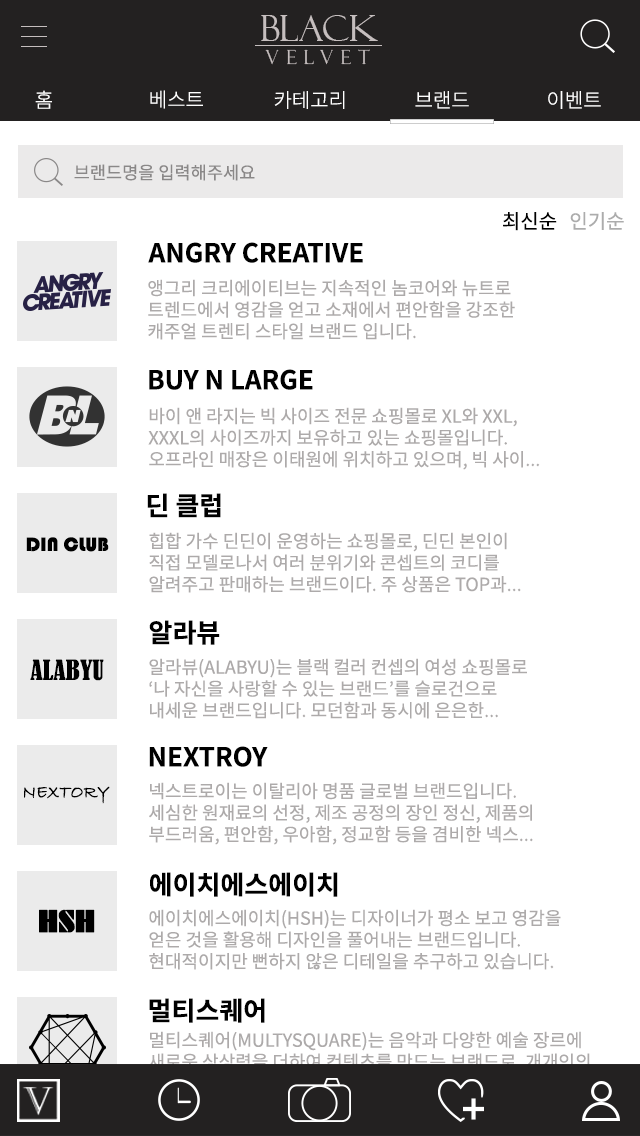
<style>
.page{position:relative;width:640px;height:1136px;background:#ffffff}
.page>*{position:absolute;margin:0}
.t1{font:35.6px "FelixTitlingMT";color:#c5bebe}
.t2{font:19.4px "FelixTitlingMT";letter-spacing:0.4em;color:#c5bebe}
.t3{font:20px "NotoSansCJKkr-Light";color:#ffffff}
.t4{font:17.6px "NotoSansCJKkr-Regular";color:#8a8888}
.t5{font:20px "NotoSansCJKkr-Regular";color:#000000}
.t6{font:20px "NotoSansCJKkr-Regular";color:#acacac}
.t7{font:26px "NotoSansCJKkr-Bold";color:#000000}
.t8{font:18px "NotoSansCJKkr-Regular";color:#adaaaa}
.t9{font:20px "Bauhaus93";color:#000000}
.t10{font:26px "BernardMT-Condensed";color:#010101}
.t11{font:18px "BradleyHandITC";color:#000000;font-weight:bold}
.t12{font:30px "FuturaBlack-BT";color:#000000;font-weight:bold}
</style>
<div class="page">
<p class="t1" style="left:261px;top:15px;width:117px;height:26px">BLACK</p>
<p class="t2" style="left:265px;top:49px;width:105px;height:16px">VELVET</p>
<p class="t3" style="left:35px;top:90px;width:17px;height:19px">홈</p>
<p class="t3" style="left:150px;top:90px;width:53px;height:19px">베스트</p>
<p class="t3" style="left:274px;top:91px;width:71px;height:18px">카테고리</p>
<p class="t3" style="left:415px;top:91px;width:54px;height:18px">브랜드</p>
<p class="t3" style="left:548px;top:91px;width:53px;height:18px">이벤트</p>
<p class="t4" style="left:74px;top:164px;width:181px;height:17px">브랜드명을 입력해주세요</p>
<p class="t5" style="left:503px;top:212px;width:54px;height:19px">최신순</p>
<p class="t6" style="left:570px;top:212px;width:54px;height:18px">인기순</p>
<p class="t7" style="left:148px;top:242px;width:215px;height:21px">ANGRY CREATIVE</p>
<p class="t8" style="left:148px;top:279px;width:367px;height:61px">앵그리 크리에이티브는 지속적인 놈코어와 뉴트로 <br>트렌드에서 영감을 얻고 소재에서 편안함을 강조한 <br>캐주얼 트렌티 스타일 브랜드 입니다.</p>
<p class="t7" style="left:149px;top:369px;width:164px;height:21px">BUY N LARGE</p>
<p class="t8" style="left:148px;top:407px;width:392px;height:63px">바이 앤 라지는 빅 사이즈 전문 쇼핑몰로 XL와 XXL,<br>XXXL의 사이즈까지 보유하고 있는 쇼핑몰입니다.<br>오프라인 매장은 이태원에 위치하고 있으며, 빅 사이...</p>
<p class="t7" style="left:147px;top:493px;width:74px;height:25px">딘 클럽</p>
<p class="t8" style="left:149px;top:532px;width:372px;height:61px">힙합 가수 딘딘이 운영하는 쇼핑몰로, 딘딘 본인이 <br>직접 모델로나서 여러 분위기와 콘셉트의 코디를<br>알려주고 판매하는 브랜드이다. 주 상품은 TOP과...</p>
<p class="t9" style="left:26px;top:537px;width:83px;height:15px">DIN CLUB</p>
<p class="t7" style="left:149px;top:620px;width:71px;height:25px">알라뷰</p>
<p class="t10" style="left:30px;top:659px;width:74px;height:22px">ALABYU</p>
<p class="t8" style="left:149px;top:658px;width:378px;height:61px">알라뷰(ALABYU)는 블랙 컬러 컨셉의 여성 쇼핑몰로<br>‘나 자신을 사랑할 수 있는 브랜드’를 슬로건으로 <br>내세운 브랜드입니다. 모던함과 동시에 은은한...</p>
<p class="t7" style="left:149px;top:746px;width:119px;height:21px">NEXTROY</p>
<p class="t8" style="left:149px;top:782px;width:384px;height:63px">넥스트로이는 이탈리아 명품 글로벌 브랜드입니다.<br>세심한 원재료의 선정, 제조 공정의 장인 정신, 제품의<br>부드러움, 편안함, 우아함, 정교함 등을 겸비한 넥스...</p>
<p class="t11" style="left:24px;top:786px;width:86px;height:18px">NEXTORY</p>
<p class="t7" style="left:150px;top:872px;width:188px;height:25px">에이치에스에이치</p>
<p class="t12" style="left:39px;top:909px;width:56px;height:24px">HSH</p>
<p class="t8" style="left:149px;top:909px;width:412px;height:61px">에이치에스에이치(HSH)는 디자이너가 평소 보고 영감을<br>얻은 것을 활용해 디자인을 풀어내는 브랜드입니다.<br>현대적이지만 뻔하지 않은 디테일을 추구하고 있습니다.</p>
<p class="t7" style="left:149px;top:998px;width:116px;height:25px">멀티스퀘어</p>
</div>
